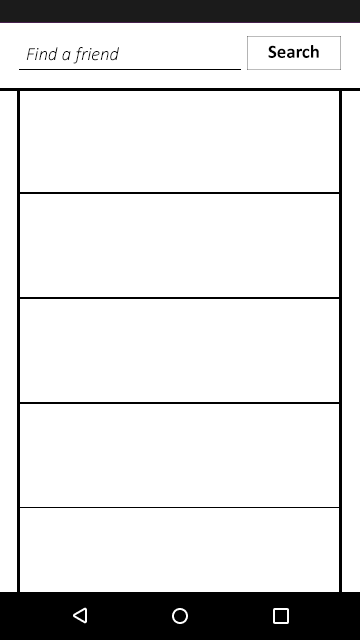
<style>
.page{position:relative;width:360px;height:640px;background:#ffffff}
.page>*{position:absolute;margin:0}
.t1{font:18.7px "Calibri-LightItalic";color:#000000}
.t2{font:18.7px "Calibri-Bold";color:#000000}
</style>
<div class="page">
<p class="t1" style="left:26px;top:47px;width:93px;height:17px">Find a friend</p>
<p class="t2" style="left:268px;top:45px;width:51px;height:13px">Search</p>
</div>
